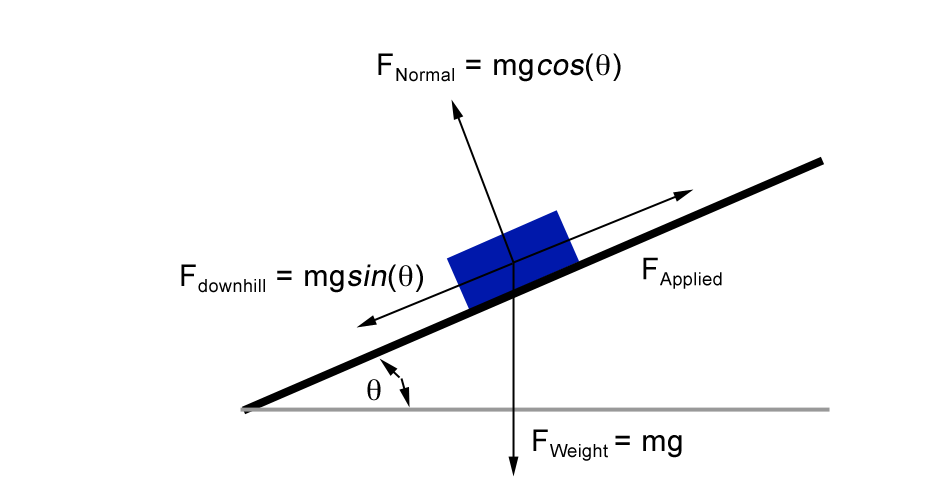
<style>
.page{position:relative;width:950px;height:500px;background:#ffffff}
.page>*{position:absolute;margin:0}
.t1{font:18px "ArialMT";letter-spacing:0.025em;color:#000000}
.t2{font:30px "ArialMT";letter-spacing:0.025em;color:#000000}
.t3{font:30px "ArialMT";letter-spacing:0.025em;color:#000000;font-style:italic}
.t4{font:30px "Symbol";letter-spacing:0.025em;color:#000000}
</style>
<div class="page">
<p class="t1" style="left:378px;top:53px;width:243px;height:29px"><span class="t2">F</span>Normal<span class="t2"> = mg</span><span class="t3">cos</span><span class="t2">(</span><span class="t4">q</span><span class="t2">)</span></p>
<p class="t1" style="left:643px;top:257px;width:79px;height:32px"><span class="t2">F</span>Applied</p>
<p class="t1" style="left:181px;top:264px;width:242px;height:29px"><span class="t2">F</span>downhill<span class="t2"> = mg</span><span class="t3">sin</span><span class="t2">(</span><span class="t4">q</span><span class="t2">)</span></p>
<p class="t1" style="left:533px;top:429px;width:149px;height:32px"><span class="t2">F</span>Weight <span class="t2">= mg</span></p>
</div>
